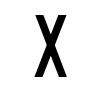
<style>
.page{position:relative;width:100px;height:100px;background:#ffffff}
.page>*{position:absolute;margin:0}
.t1{font:100px "TwCenMT-Condensed";color:#000000}
</style>
<div class="page">
<p class="t1" style="left:34px;top:15px;width:33px;height:62px">X</p>
</div>
